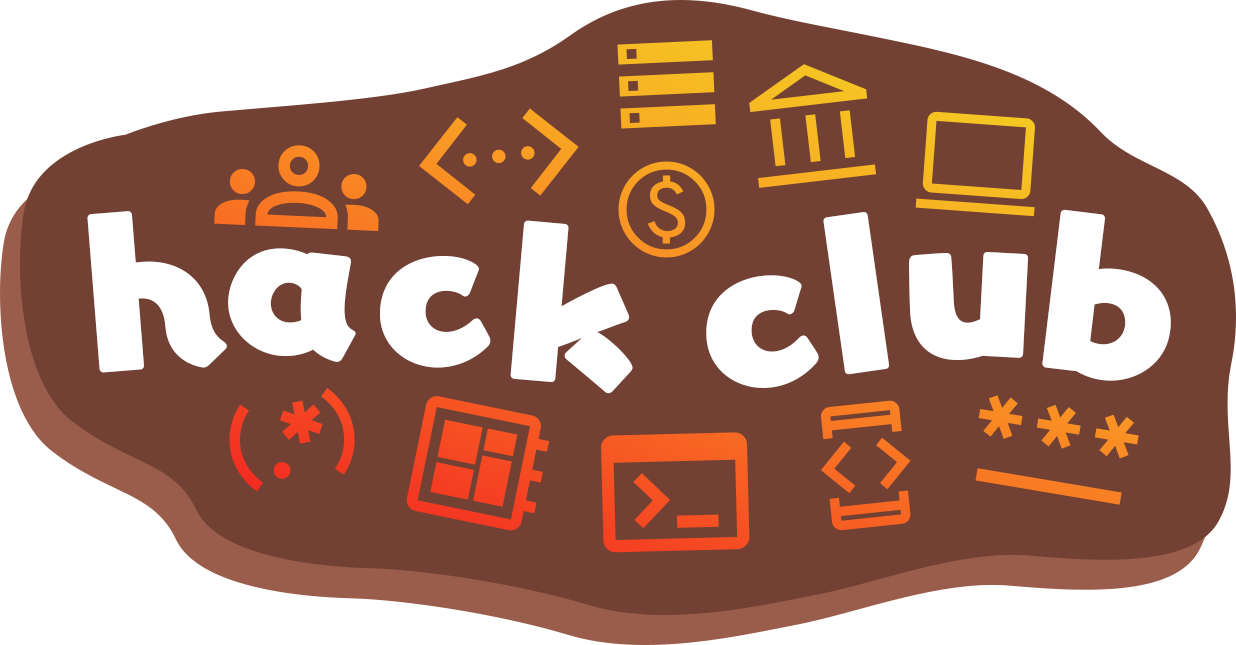
<style>
.page{position:relative;width:1236px;height:645px;background:#724133}
.page>*{position:absolute;margin:0}
.t1{font:184.5px "YurukaStd-UB";color:#ffffff}
</style>
<div class="page">
<p class="t1" style="left:1042px;top:209px;width:129px;height:172px;rotate:10deg">b</p>
<p class="t1" style="left:87px;top:211px;width:140px;height:162px;rotate:-5deg">h</p>
<p class="t1" style="left:510px;top:220px;width:123px;height:174px;rotate:8deg">k</p>
<p class="t1" style="left:823px;top:212px;width:66px;height:163px;rotate:-8deg">l</p>
<p class="t1" style="left:228px;top:248px;width:128px;height:114px;rotate:2deg">a</p>
<p class="t1" style="left:380px;top:256px;width:111px;height:112px">c</p>
<p class="t1" style="left:909px;top:252px;width:119px;height:108px">u</p>
<p class="t1" style="left:706px;top:275px;width:113px;height:113px;rotate:-4deg">c</p>
</div>
